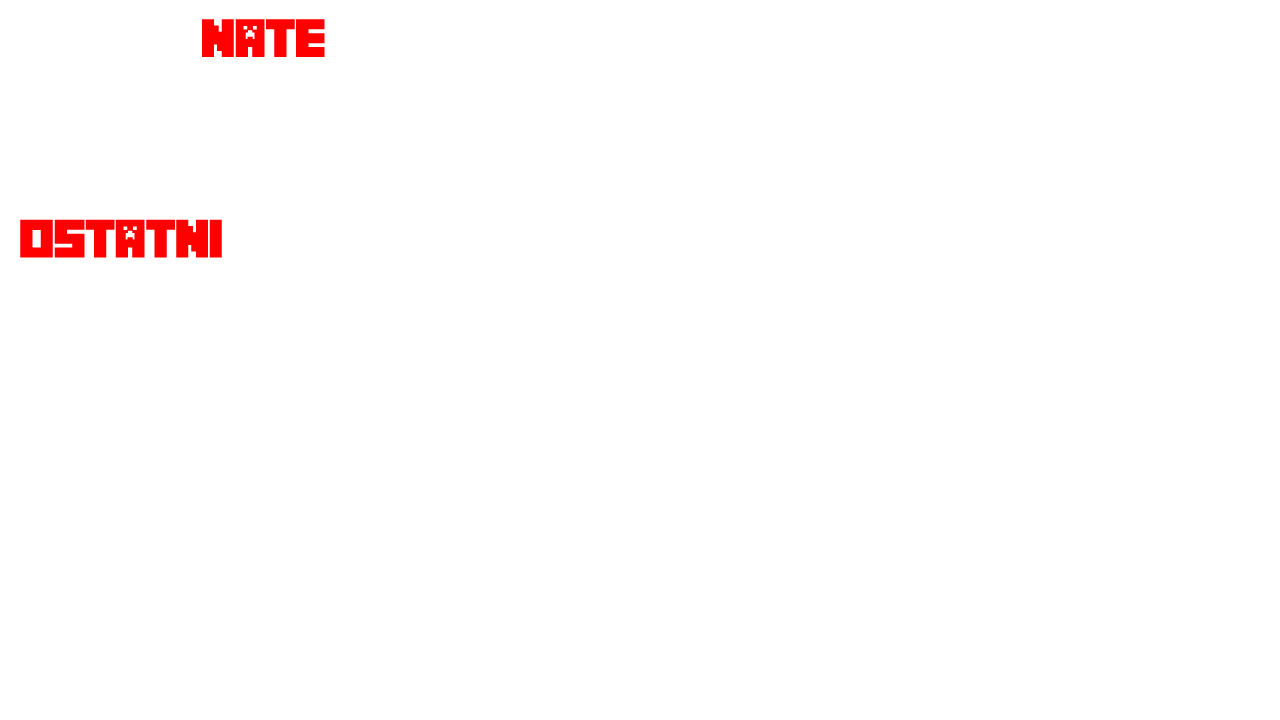
<style>
.page{position:relative;width:1280px;height:720px;background:#ffffff}
.page>*{position:absolute;margin:0}
.t1{font:48px "Minecrafter";letter-spacing:-0.04em;color:#ffffff}
.t2{font:48px "Minecrafter";letter-spacing:-0.04em;color:#ff0000}
</style>
<div class="page">
<p class="t1" style="left:19px;top:19px;width:306px;height:38px">top do<span class="t2">nate</span></p>
<p class="t2" style="left:20px;top:219px;width:415px;height:39px">ostatni <span class="t1">donate</span></p>
</div>
